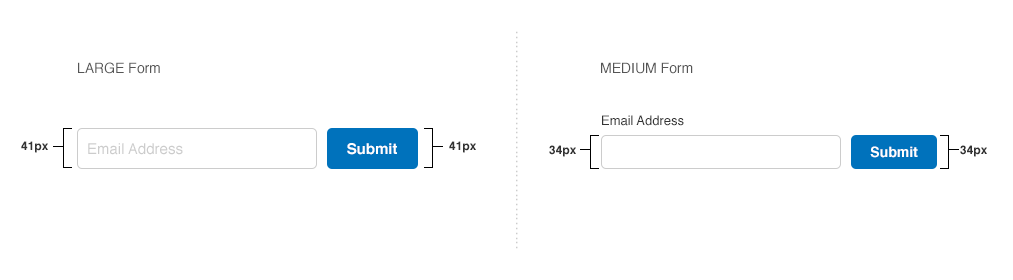
<style>
.page{position:relative;width:1013px;height:280px;background:#ffffff}
.page>*{position:absolute;margin:0}
.t1{font:10px "HelveticaNeue-Medium";letter-spacing:0.2em;color:#cccccc}
.t2{font:14px "Helvetica";color:#555555}
.t3{font:13px "Helvetica";color:#333333}
.t4{font:12px "Helvetica-Bold";color:#333333}
.t5{font:15px "Helvetica";color:#cccccc}
.t6{font:15px "Helvetica-Bold";color:#ffffff}
.t7{font:14px "Helvetica-Bold";color:#ffffff}
</style>
<div class="page">
<p class="t1" style="left:516px;top:31px;width:2px;height:218px;rotate:90deg">..............................................</p>
<p class="t2" style="left:78px;top:62px;width:82px;height:12px">LARGE Form</p>
<p class="t2" style="left:601px;top:62px;width:92px;height:12px">MEDIUM Form</p>
<p class="t3" style="left:602px;top:115px;width:82px;height:11px">Email Address</p>
<p class="t4" style="left:21px;top:141px;width:27px;height:12px">41px</p>
<p class="t5" style="left:88px;top:143px;width:95px;height:12px">Email Address</p>
<p class="t6" style="left:347px;top:143px;width:50px;height:12px">Submit</p>
<p class="t4" style="left:449px;top:141px;width:27px;height:12px">41px</p>
<p class="t4" style="left:549px;top:145px;width:27px;height:12px">34px</p>
<p class="t7" style="left:870px;top:146px;width:48px;height:12px">Submit</p>
<p class="t4" style="left:960px;top:145px;width:27px;height:12px">34px</p>
</div>
